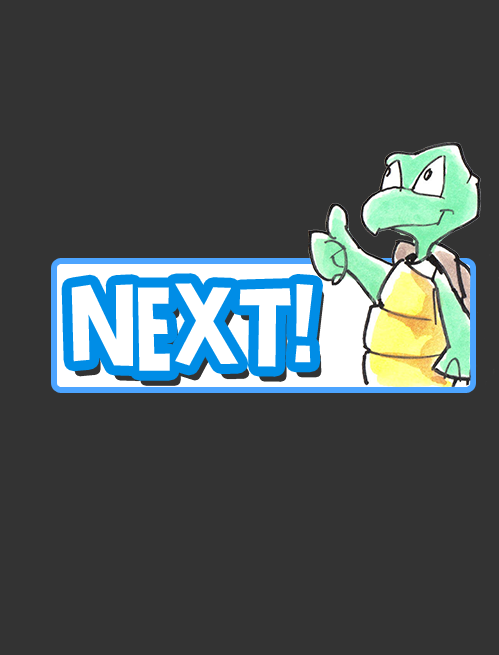
<style>
.page{position:relative;width:499px;height:655px;background:#333333}
.page>*{position:absolute;margin:0}
.t1{font:105.6px "Gumbutcha";color:#ffffff;scale:0.92 1}
</style>
<div class="page">
<p class="t1" style="left:71px;top:283px;width:242px;height:88px;rotate:-1deg">NEXT!</p>
</div>
